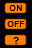
<style>
.page{position:relative;width:32px;height:48px;background:#000000}
.page>*{position:absolute;margin:0}
.t1{font:8px "ArialMT";letter-spacing:0.1em;color:#000000}
.t2{font:8px "ArialMT";letter-spacing:0.05em;color:#000000}
.t3{font:10px "Arial-BoldMT";letter-spacing:0.1em;color:#000000}
</style>
<div class="page">
<p class="t1" style="left:9px;top:5px;width:13px;height:6px">ON</p>
<p class="t2" style="left:7px;top:21px;width:18px;height:6px">OFF</p>
<p class="t3" style="left:13px;top:37px;width:6px;height:7px">?</p>
</div>
